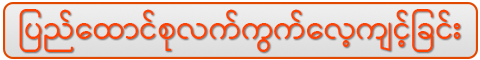
<style>
.page{position:relative;width:480px;height:60px}
.page>*{position:absolute;margin:0}
.t1{font:30.7px "Pyidaungsu";color:#ff4200}
</style>
<div class="page">
<p class="t1" style="left:19px;top:9px;width:442px;height:43px">ြပည်‌ေထာင်စုလက်ကွက်‌ေလ့ကျင့်ြခင်း</p>
</div>
